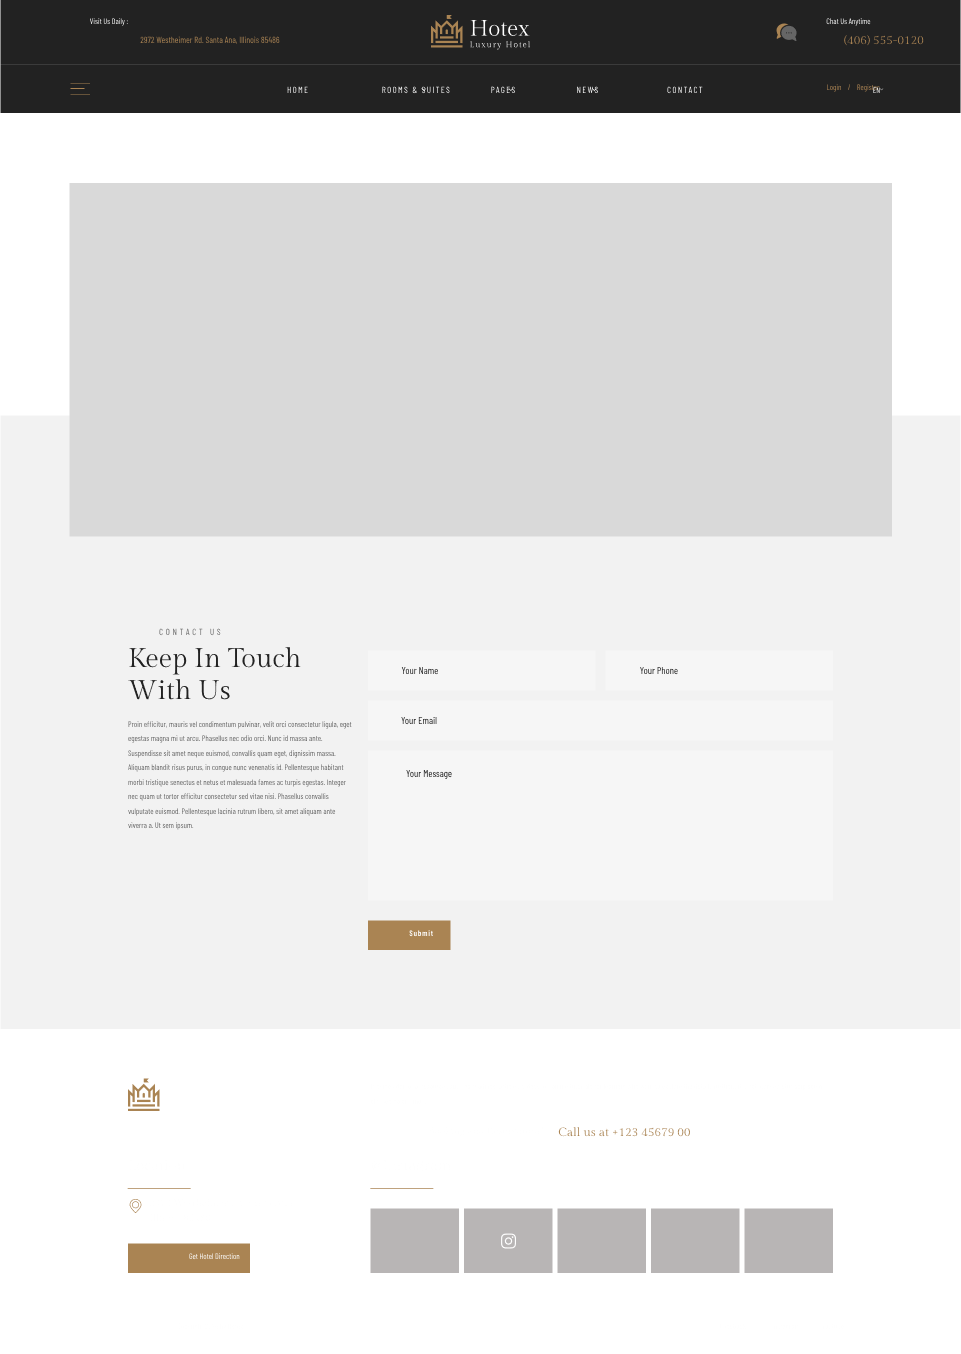
<style>
.page{position:relative;width:961px;height:1354px;background:#ffffff}
.page>*{position:absolute;margin:0}
.t1{font:8px "BarlowCondensed-Regular"}
.t2{font:9px "BarlowCondensed-Regular";color:#aa8453}
.t3{font:12px "GildaDisplay-Regular";color:#aa8453}
.t4{font:9px "BarlowCondensed-Regular";letter-spacing:0.15em;text-transform:uppercase}
.t5{font:9px "BarlowCondensed-Regular";letter-spacing:0.3em;text-transform:uppercase}
.t6{font:27px "GildaDisplay-Regular";color:#222222}
.t7{font:10px "BarlowCondensed-Regular"}
.t8{font:8px/14.5px "BarlowCondensed-Regular"}
.t9{font:8px "BarlowCondensed-SemiBold";letter-spacing:0.1em;color:#ffffff}
</style>
<div class="page">
<p class="t1" style="left:90px;top:18px;width:38px;height:8px">Visit Us Daily :</p>
<p class="t1" style="left:826px;top:18px;width:45px;height:8px">Chat Us Anytime</p>
<p class="t2" style="left:140px;top:36px;width:140px;height:8px">2972 Westheimer Rd. Santa Ana, Illinois 85486</p>
<p class="t3" style="left:844px;top:35px;width:80px;height:11px">(406) 555-0120</p>
<p class="t4" style="left:287px;top:86px;width:21px;height:8px">Home</p>
<p class="t4" style="left:382px;top:86px;width:68px;height:8px">Rooms &amp; Suites</p>
<p class="t4" style="left:491px;top:86px;width:24px;height:8px">Pages</p>
<p class="t4" style="left:577px;top:86px;width:21px;height:8px">News</p>
<p class="t4" style="left:667px;top:86px;width:36px;height:8px">Contact</p>
<p class="t1" style="left:827px;top:84px;width:53px;height:8px">Login    /    Register</p>
<p class="t1" style="left:873px;top:87px;width:7px;height:6px">EN</p>
<p class="t5" style="left:159px;top:628px;width:62px;height:8px">Contact Us</p>
<p class="t6" style="left:128px;top:647px;width:173px;height:53px">Keep In Touch With Us</p>
<p class="t7" style="left:401px;top:667px;width:37px;height:8px">Your Name</p>
<p class="t7" style="left:640px;top:666px;width:38px;height:9px">Your Phone</p>
<p class="t8" style="left:128px;top:721px;width:224px;height:109px">Proin efficitur, mauris vel condimentum pulvinar, velit orci consectetur ligula, eget egestas magna mi ut arcu. Phasellus nec odio orci. Nunc id massa ante. Suspendisse sit amet neque euismod, convallis quam eget, dignissim massa. Aliquam blandit risus purus, in congue nunc venenatis id. Pellentesque habitant morbi tristique senectus et netus et malesuada fames ac turpis egestas. Integer nec quam ut tortor efficitur consectetur sed vitae nisi. Phasellus convallis vulputate euismod. Pellentesque lacinia rutrum libero, sit amet aliquam ante viverra a. Ut sem ipsum.</p>
<p class="t7" style="left:401px;top:716px;width:36px;height:9px">Your Email</p>
<p class="t7" style="left:406px;top:770px;width:46px;height:10px">Your Message</p>
<p class="t9" style="left:409px;top:930px;width:24px;height:7px">Submit</p>
<p class="t3" style="left:558px;top:1127px;width:132px;height:10px">Call us at +123 45679 00</p>
<p class="t1" style="left:189px;top:1253px;width:51px;height:7px">Get Hotel Direction</p>
</div>
